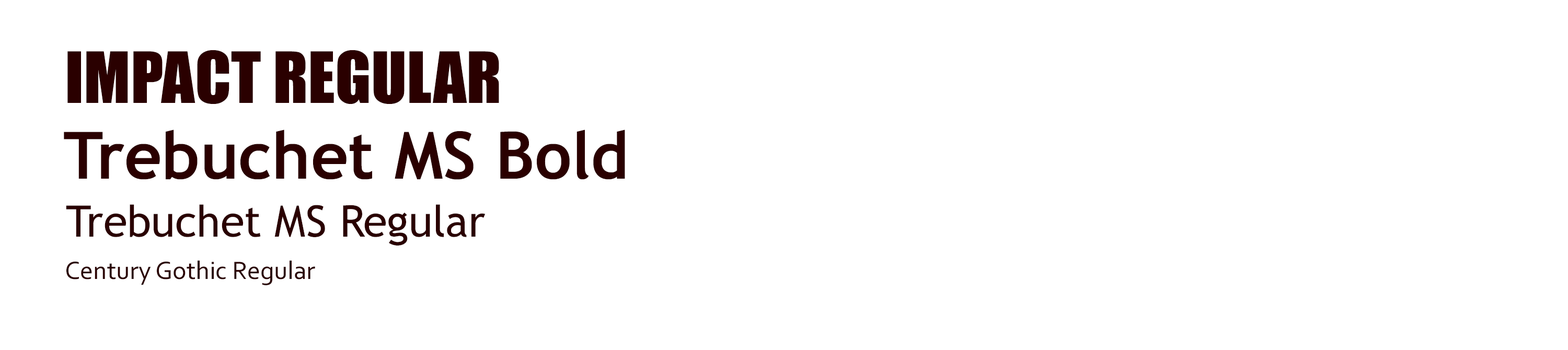
<style>
.page{position:relative;width:1568px;height:350px;background:#ffffff}
.page>*{position:absolute;margin:0}
.t1{font:65.3px "Impact";color:#2a0000}
.t2{font:65.3px "TrebuchetMS-Bold";color:#2a0000}
.t3{font:43.6px "TrebuchetMS";color:#2a0000}
.t4{font:26.1px "Corbel";color:#2a0000}
</style>
<div class="page">
<p class="t1" style="left:67px;top:50px;width:432px;height:54px">IMPACT REGULAR</p>
<p class="t2" style="left:64px;top:130px;width:561px;height:50px">Trebuchet MS Bold</p>
<p class="t3" style="left:66px;top:204px;width:420px;height:42px">Trebuchet MS Regular</p>
<p class="t4" style="left:66px;top:260px;width:249px;height:25px">Century Gothic Regular</p>
</div>
